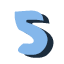
<style>
.page{position:relative;width:64px;height:64px;background:#ffffff}
.page>*{position:absolute;margin:0}
.t1{font:66px "Samba";color:#84b7eb}
.t2{font:66px "Samba"}
</style>
<div class="page">
<p class="t1" style="left:14px;top:10px;width:34px;height:45px">5</p>
<p class="t2" style="left:20px;top:13px;width:34px;height:45px">5</p>
</div>
